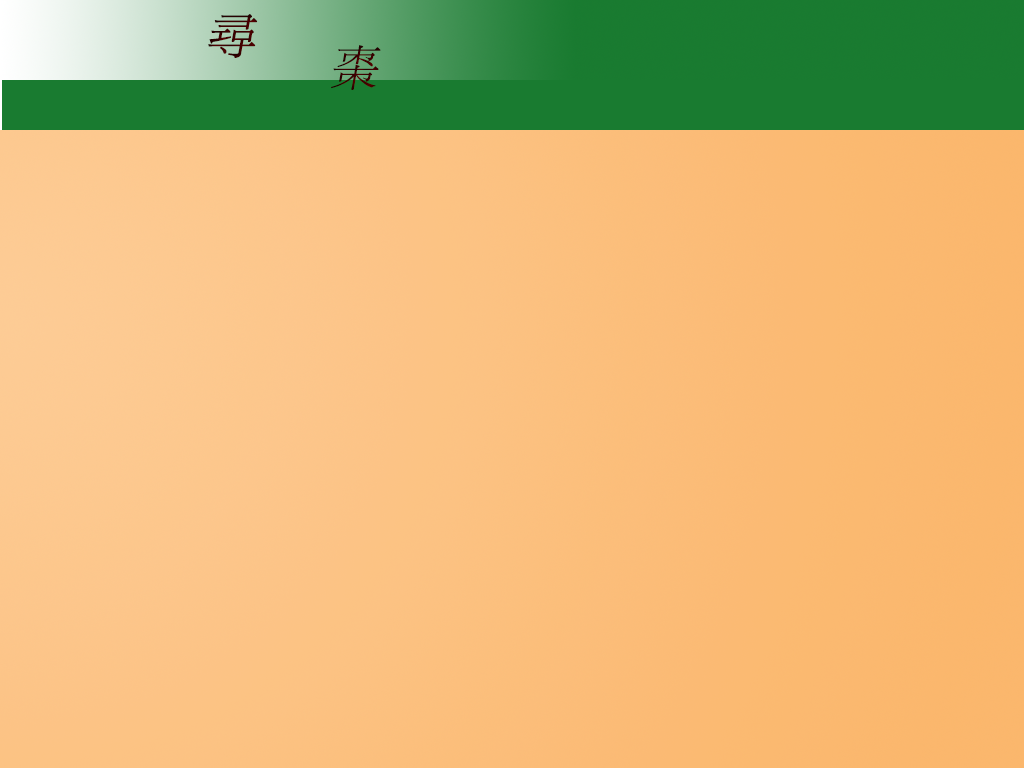
<style>
.page{position:relative;width:1024px;height:768px}
.page>*{position:absolute;margin:0}
.t1{font:48px "MingLiU";color:#3e0000;font-weight:bold;font-style:italic}
.t2{font:48px "MingLiU";color:#380000;font-style:italic}
</style>
<div class="page">
<p class="t1" style="left:208px;top:14px;width:50px;height:44px">尋</p>
<p class="t2" style="left:331px;top:45px;width:50px;height:45px">棗</p>
</div>
